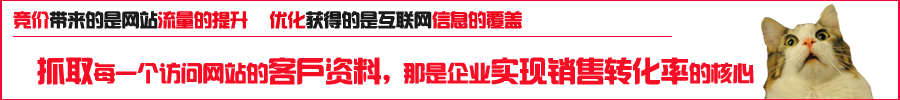
<style>
.page{position:relative;width:900px;height:100px;background:#ffffff}
.page>*{position:absolute;margin:0}
.t1{font:18.1px "FZHZGBJW--GB1-0";color:#1c1b1b}
.t2{font:18.1px "FZHZGBJW--GB1-0";color:#f70e24}
.t3{font:18.1px "FZHZGBJW--GB1-0";color:#ef061c}
.t4{font:18.1px "FZHZGBJW--GB1-0";color:#e90319}
.t5{font:21.8px "FZHZGBJW--GB1-0";color:#f70e24}
.t6{font:28.3px "FZHZGBJW--GB1-0";color:#f70e24}
</style>
<div class="page">
<p class="t1" style="left:13px;top:11px;width:509px;height:18px"><span class="t2">竞价</span>带来的是网站<span class="t3">流量的提升 </span><span class="t4">优化</span>获得的是互联网<span class="t3">信息的覆盖</span></p>
<p class="t5" style="left:37px;top:57px;width:717px;height:28px"><span class="t6">抓取</span>每一个访问网站的<span class="t6">客户资料</span>，那是企业<span class="t6">实现销售转化率</span>的核心</p>
</div>
